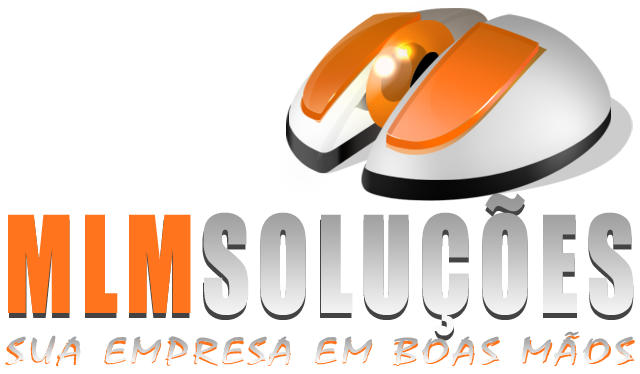
<style>
.page{position:relative;width:640px;height:374px;background:#ffffff}
.page>*{position:absolute;margin:0}
.t1{font:124.3px "Impact";letter-spacing:0.075em;scale:0.77 1}
.t2{font:124.3px "Impact";letter-spacing:0.075em;color:#ff741c;scale:0.78 1}
.t3{font:33.7px "Mistral";letter-spacing:0.075em;scale:1.57 1}
.t4{font:37.2px "Mistral";letter-spacing:0.075em;scale:1.42 1}
</style>
<div class="page">
<p class="t1" style="left:9px;top:198px;width:625px;height:143px">MLMSOLUÇÕES</p>
<p class="t2" style="left:8px;top:214px;width:183px;height:99px">MLM</p>
<p class="t3" style="left:5px;top:335px;width:630px;height:31px">SUA EMPRESA EM BOAS MÃOS</p>
<p class="t4" style="left:7px;top:331px;width:626px;height:35px">SUA EMPRESA EM BOAS MÃOS</p>
</div>
